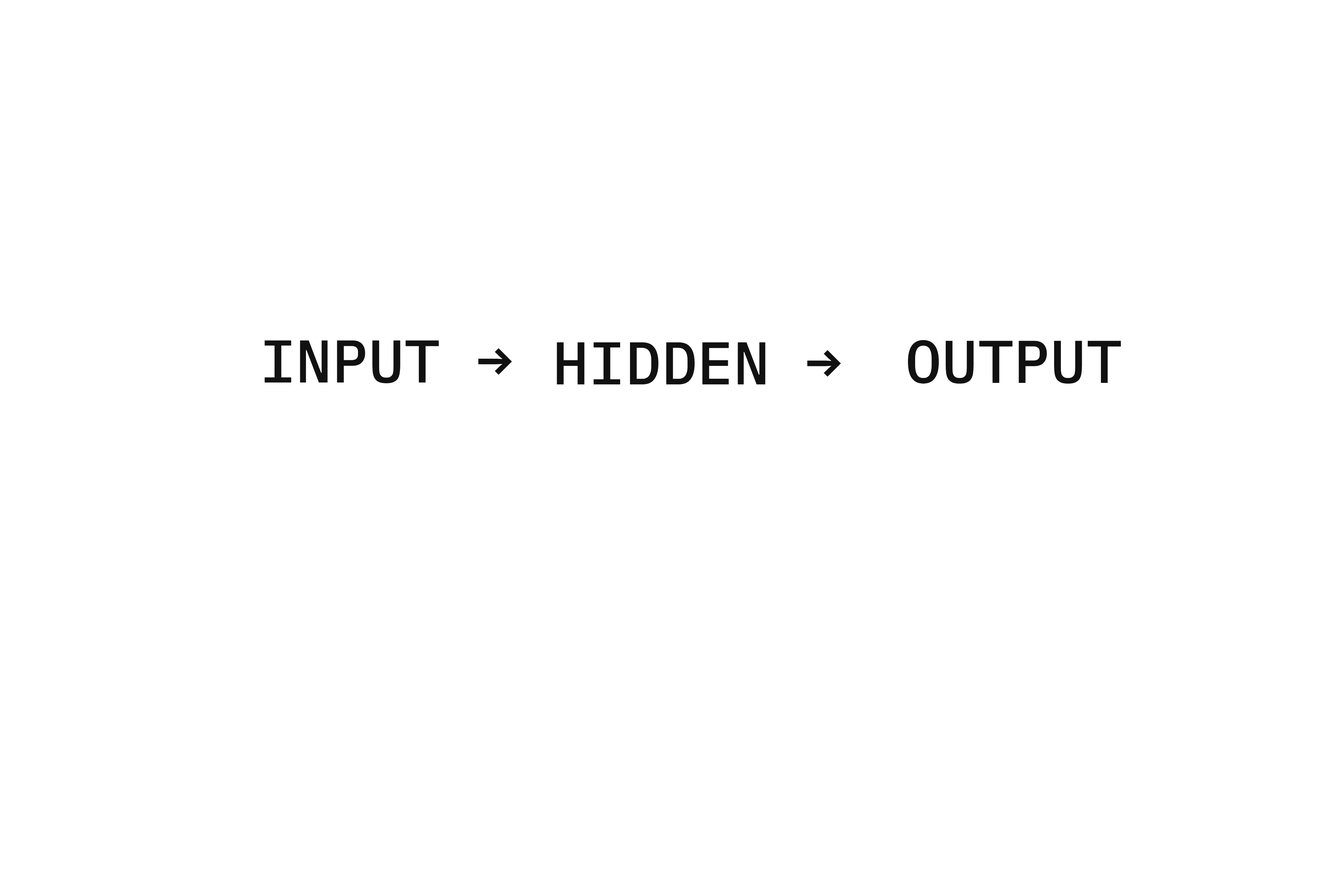
<style>
.page{position:relative;width:1337px;height:892px;background:#ffffff}
.page>*{position:absolute;margin:0}
.t1{font:60.3px "IBMPlexMono-Medium";color:#111111}
</style>
<div class="page">
<p class="t1" style="left:264px;top:340px;width:248px;height:43px">INPUT →</p>
<p class="t1" style="left:557px;top:342px;width:284px;height:42px">HIDDEN →</p>
<p class="t1" style="left:908px;top:340px;width:213px;height:43px">OUTPUT</p>
</div>
